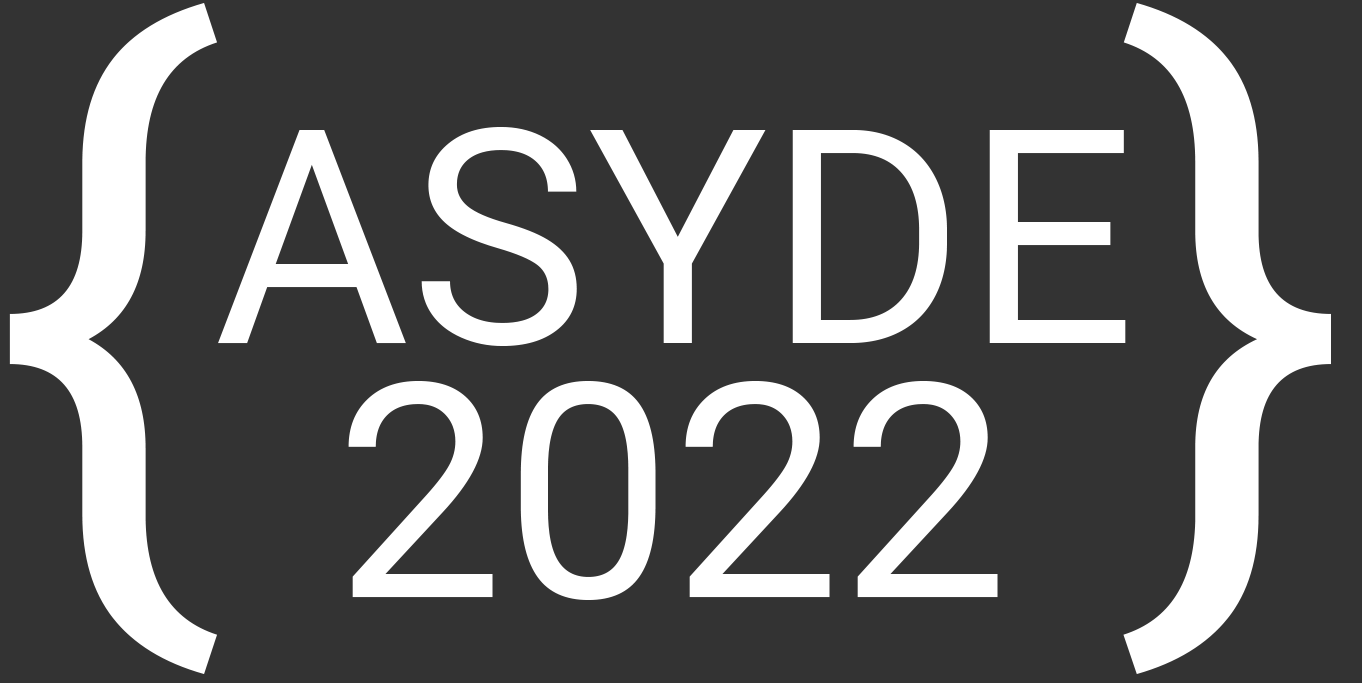
<style>
.page{position:relative;width:1362px;height:683px;background:#333333}
.page>*{position:absolute;margin:0}
.t1{font:700px "Roboto-Regular";color:#ffffff}
.t2{font:300px "Roboto-Regular";color:#ffffff}
</style>
<div class="page">
<p class="t1" style="left:9px;top:3px;width:208px;height:671px">{</p>
<p class="t1" style="left:1123px;top:3px;width:208px;height:671px">}</p>
<p class="t2" style="left:218px;top:127px;width:908px;height:219px">ASYDE</p>
<p class="t2" style="left:348px;top:381px;width:650px;height:219px">2022</p>
</div>
